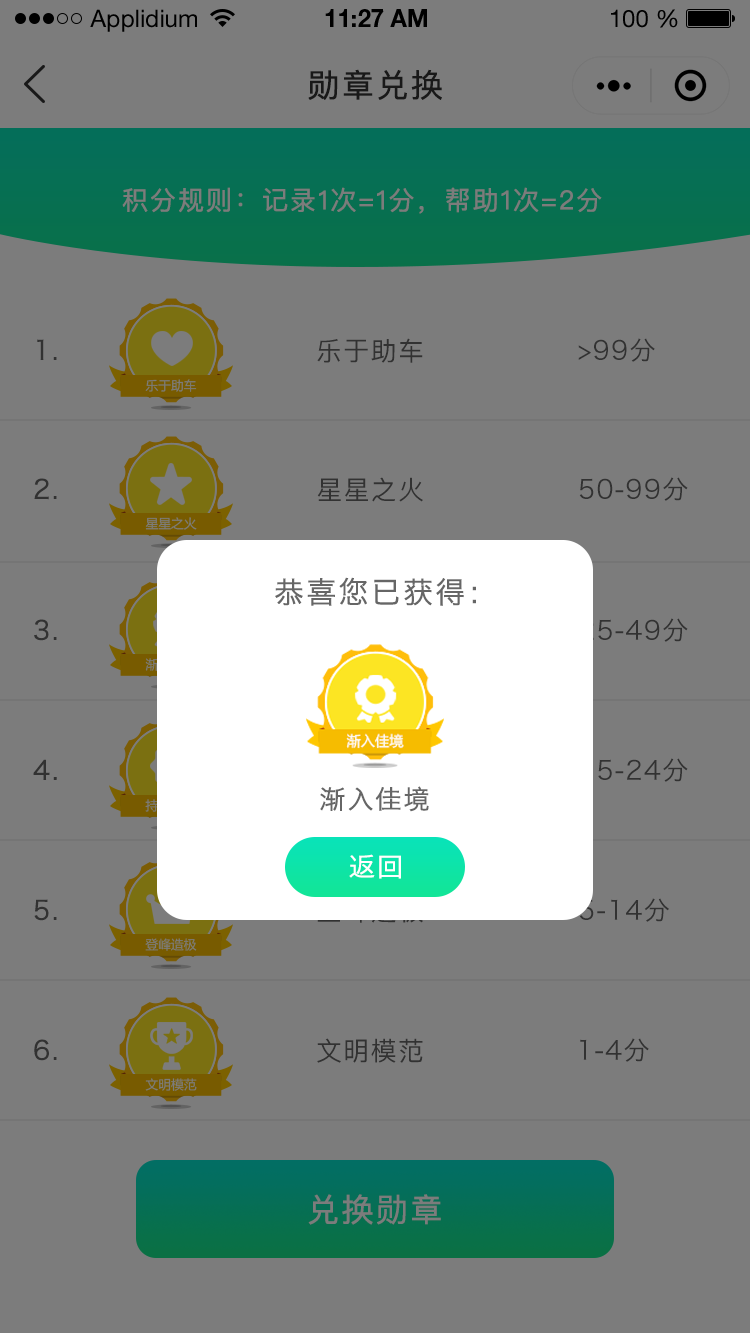
<style>
.page{position:relative;width:750px;height:1334px;background:#7c7c7c}
.page>*{position:absolute;margin:0}
.t1{font:24px "HelveticaNeueLTStd-Roman";color:#000000}
.t2{font:24px "HelveticaNeueLTStd-Bd";color:#000000}
.t3{font:32px "PingFangSC-Regular";letter-spacing:0.05em;color:#191919;font-weight:bold}
.t4{font:26px "PingFangSC-Regular";letter-spacing:0.05em;color:#7c7c7c;font-weight:bold}
.t5{font:26px "HiraginoSansGB-W3";letter-spacing:0.05em;color:#323232;font-weight:bold}
.t6{font:26px "PingFangSC-Regular";letter-spacing:0.05em;color:#323232}
.t7{font:26px "HiraginoSansGB-W3";letter-spacing:0.05em;color:#323232}
.t8{font:12.7px "MicrosoftYaHei";color:#7c7c7c}
.t9{font:30px "HiraginoSansGB-W3";letter-spacing:0.05em;color:#666666;font-weight:bold}
.t10{font:26px "PingFangSC-Regular";letter-spacing:0.05em;color:#666666;font-weight:bold}
.t11{font:26px "HiraginoSansGB-W3";letter-spacing:0.05em;color:#666666;font-weight:bold}
.t12{font:26px "HiraginoSansGB-W3";letter-spacing:0.05em;color:#ffffff;font-weight:bold}
.t13{font:26px "PingFangSC-Regular";letter-spacing:0.05em;color:#ffffff;font-weight:bold}
.t14{font:32px "PingFangSC-Regular";letter-spacing:0.05em;color:#7c7c7c;font-weight:bold}
</style>
<div class="page">
<p class="t1" style="left:90px;top:9px;width:107px;height:23px">Applidium</p>
<p class="t2" style="left:325px;top:9px;width:102px;height:18px">11:27 AM</p>
<p class="t1" style="left:611px;top:9px;width:67px;height:19px">100 %</p>
<p class="t3" style="left:308px;top:69px;width:134px;height:31px">勋章兑换</p>
<p class="t4" style="left:122px;top:187px;width:480px;height:27px">积分规则：记录1次=1分，帮助1次=2分</p>
<p class="t5" style="left:37px;top:339px;width:20px;height:21px">1.</p>
<p class="t6" style="left:317px;top:338px;width:106px;height:25px">乐于助车</p>
<p class="t7" style="left:578px;top:338px;width:77px;height:24px">&gt;99分</p>
<p class="t8" style="left:145px;top:379px;width:52px;height:13px">乐于助车</p>
<p class="t5" style="left:34px;top:478px;width:23px;height:22px">2.</p>
<p class="t6" style="left:317px;top:477px;width:106px;height:25px">星星之火</p>
<p class="t7" style="left:579px;top:477px;width:109px;height:24px">50-99分</p>
<p class="t8" style="left:145px;top:517px;width:52px;height:13px">星星之火</p>
<p class="t9" style="left:275px;top:577px;width:201px;height:29px">恭喜您已获得：</p>
<p class="t9" style="left:275px;top:577px;width:201px;height:29px">恭喜您已获得：</p>
<p class="t5" style="left:34px;top:619px;width:23px;height:22px">3.</p>
<p class="t5" style="left:33px;top:759px;width:24px;height:21px">4.</p>
<p class="t7" style="left:582px;top:758px;width:106px;height:24px">15-24分</p>
<p class="t10" style="left:320px;top:787px;width:109px;height:25px">渐入佳境</p>
<p class="t11" style="left:320px;top:786px;width:109px;height:26px">渐入佳境</p>
<p class="t12" style="left:349px;top:854px;width:52px;height:25px">返回</p>
<p class="t13" style="left:350px;top:855px;width:51px;height:24px">返回</p>
<p class="t5" style="left:34px;top:899px;width:23px;height:22px">5.</p>
<p class="t7" style="left:579px;top:898px;width:90px;height:24px">5-14分</p>
<p class="t8" style="left:145px;top:938px;width:52px;height:13px">登峰造极</p>
<p class="t6" style="left:317px;top:1038px;width:106px;height:25px">文明模范</p>
<p class="t7" style="left:580px;top:1038px;width:69px;height:24px">1-4分</p>
<p class="t5" style="left:34px;top:1039px;width:23px;height:22px">6.</p>
<p class="t8" style="left:145px;top:1078px;width:52px;height:13px">文明模范</p>
<p class="t14" style="left:308px;top:1194px;width:133px;height:31px">兑换勋章</p>
</div>
